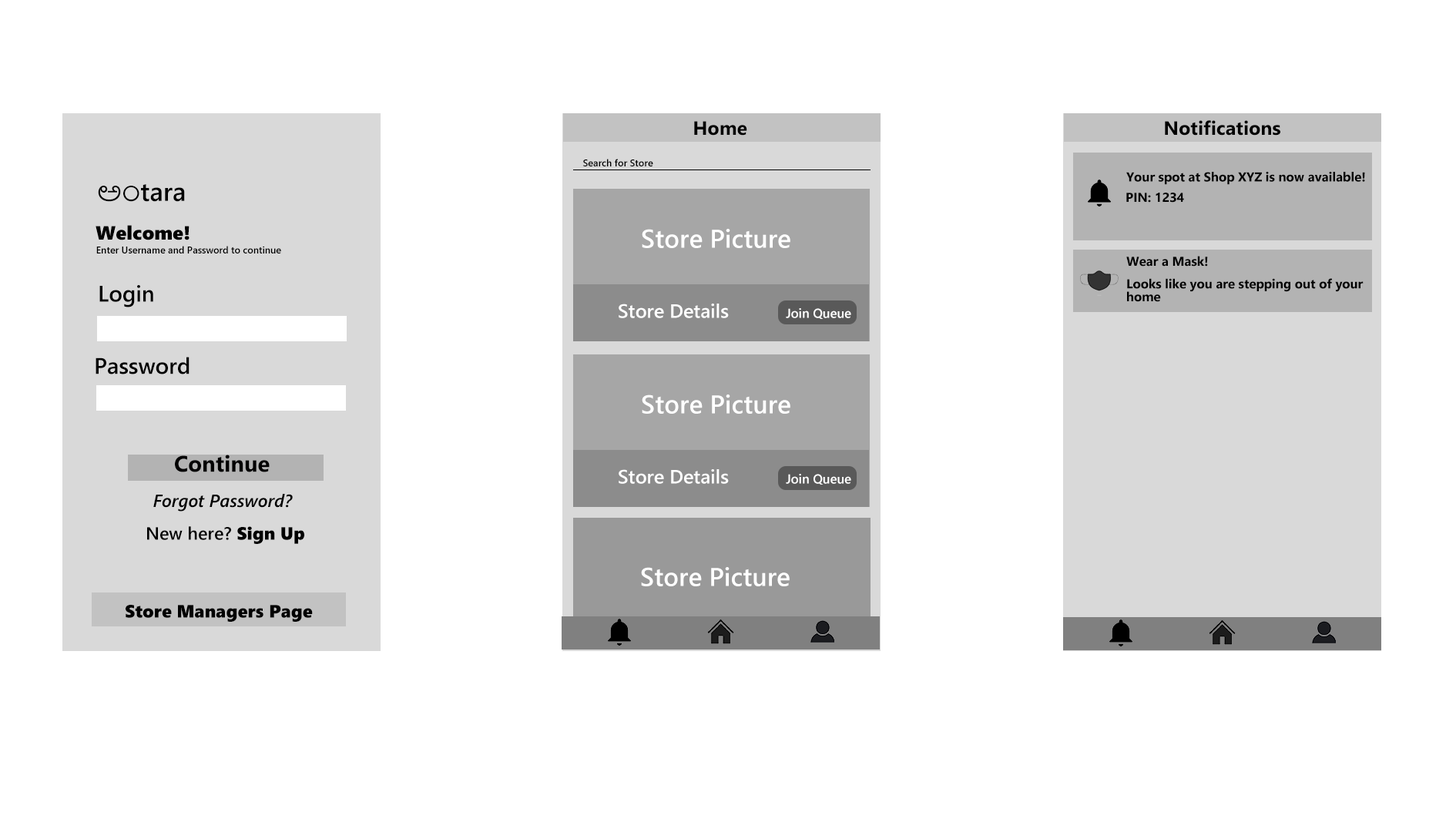
<style>
.page{position:relative;width:1456px;height:819px;background:#ffffff}
.page>*{position:absolute;margin:0}
.t1{font:19.3px "SegoeUI-Bold";color:#000000}
.t2{font:9.6px "SegoeUI-Semibold";color:#000000}
.t3{font:12.8px "SegoeUI-Bold";color:#000000}
.t4{font:25.7px "SegoeUI-Semibold";color:#000000}
.t5{font:25.7px "NirmalaUI";color:#000000}
.t6{font:19.3px "SegoeUIBlack";color:#000000}
.t7{font:25.7px "SegoeUI-Semibold";color:#ffffff}
.t8{font:22.5px "SegoeUI-Semibold";color:#000000}
.t9{font:19.3px "SegoeUI-Semibold";color:#ffffff}
.t10{font:12.8px "SegoeUI-Semibold";color:#ffffff}
.t11{font:22.5px "SegoeUI-Bold";color:#010001}
.t12{font:17.7px "SegoeUI-SemiboldItalic";color:#000000}
.t13{font:18px "SegoeUI-Semibold";color:#000000}
.t14{font:18px "SegoeUIBlack";color:#000000}
</style>
<div class="page">
<p class="t1" style="left:694px;top:121px;width:53px;height:15px">Home</p>
<p class="t1" style="left:1165px;top:120px;width:115px;height:16px">Notifications</p>
<p class="t2" style="left:583px;top:159px;width:70px;height:7px">Search for Store</p>
<p class="t3" style="left:1126px;top:172px;width:239px;height:13px">Your spot at Shop XYZ is now available!</p>
<p class="t4" style="left:98px;top:184px;width:87px;height:18px"><span class="t5">ಅಂ</span>tara</p>
<p class="t3" style="left:1126px;top:193px;width:58px;height:10px">PIN: 1234</p>
<p class="t6" style="left:96px;top:225px;width:94px;height:15px">Welcome!</p>
<p class="t7" style="left:642px;top:229px;width:148px;height:19px">Store Picture</p>
<p class="t2" style="left:96px;top:246px;width:185px;height:7px">Enter Username and Password to continue</p>
<p class="t3" style="left:1126px;top:256px;width:238px;height:36px;text-align:justify">Wear a Mask!<br>Looks like you are stepping out of your</p>
<p class="t8" style="left:99px;top:285px;width:54px;height:22px">Login</p>
<p class="t3" style="left:1127px;top:291px;width:34px;height:11px">home</p>
<p class="t9" style="left:619px;top:304px;width:110px;height:14px">Store Details</p>
<p class="t10" style="left:786px;top:308px;width:65px;height:11px">Join Queue</p>
<p class="t8" style="left:96px;top:357px;width:94px;height:17px">Password</p>
<p class="t7" style="left:642px;top:394px;width:148px;height:20px">Store Picture</p>
<p class="t11" style="left:175px;top:455px;width:95px;height:17px">Continue</p>
<p class="t9" style="left:619px;top:469px;width:110px;height:15px">Store Details</p>
<p class="t10" style="left:786px;top:474px;width:65px;height:11px">Join Queue</p>
<p class="t12" style="left:153px;top:494px;width:140px;height:18px">Forgot Password?</p>
<p class="t13" style="left:147px;top:526px;width:157px;height:18px">New here? <span class="t14">Sign Up</span></p>
<p class="t7" style="left:641px;top:567px;width:149px;height:19px">Store Picture</p>
<p class="t14" style="left:126px;top:605px;width:187px;height:17px">Store Managers Page</p>
</div>
